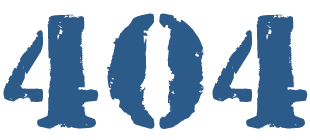
<style>
.page{position:relative;width:310px;height:140px;background:#ffffff}
.page>*{position:absolute;margin:0}
.t1{font:170px "G2RubberStampLetPlain";color:#2d5b89}
</style>
<div class="page">
<p class="t1" style="left:3px;top:13px;width:305px;height:116px">404</p>
</div>
